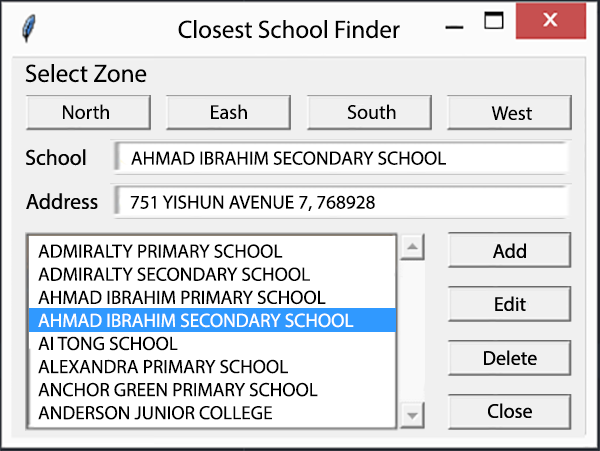
<style>
.page{position:relative;width:600px;height:451px;background:#f0f0f0}
.page>*{position:absolute;margin:0}
.t1{font:25px "MyriadPro-Regular";color:#000000}
.t2{font:19.2px "MyriadPro-Regular";color:#000000}
.t3{font:19.2px "MyriadPro-Regular";color:#ffffff}
</style>
<div class="page">
<p class="t1" style="left:178px;top:20px;width:222px;height:19px">Closest School Finder</p>
<p class="t1" style="left:25px;top:64px;width:122px;height:19px">Select Zone</p>
<p class="t2" style="left:131px;top:151px;width:315px;height:14px">AHMAD IBRAHIM SECONDARY SCHOOL</p>
<p class="t2" style="left:130px;top:195px;width:245px;height:16px">751 YISHUN AVENUE 7, 768928</p>
<p class="t2" style="left:38px;top:244px;width:316px;height:176px">ADMIRALTY PRIMARY SCHOOL<br>ADMIRALTY SECONDARY SCHOOL<br>AHMAD IBRAHIM PRIMARY SCHOOL<br><span class="t3">AHMAD IBRAHIM SECONDARY SCHOOL<br></span>AI TONG SCHOOL<br>ALEXANDRA PRIMARY SCHOOL<br>ANCHOR GREEN PRIMARY SCHOOL<br>ANDERSON JUNIOR COLLEGE</p>
</div>
